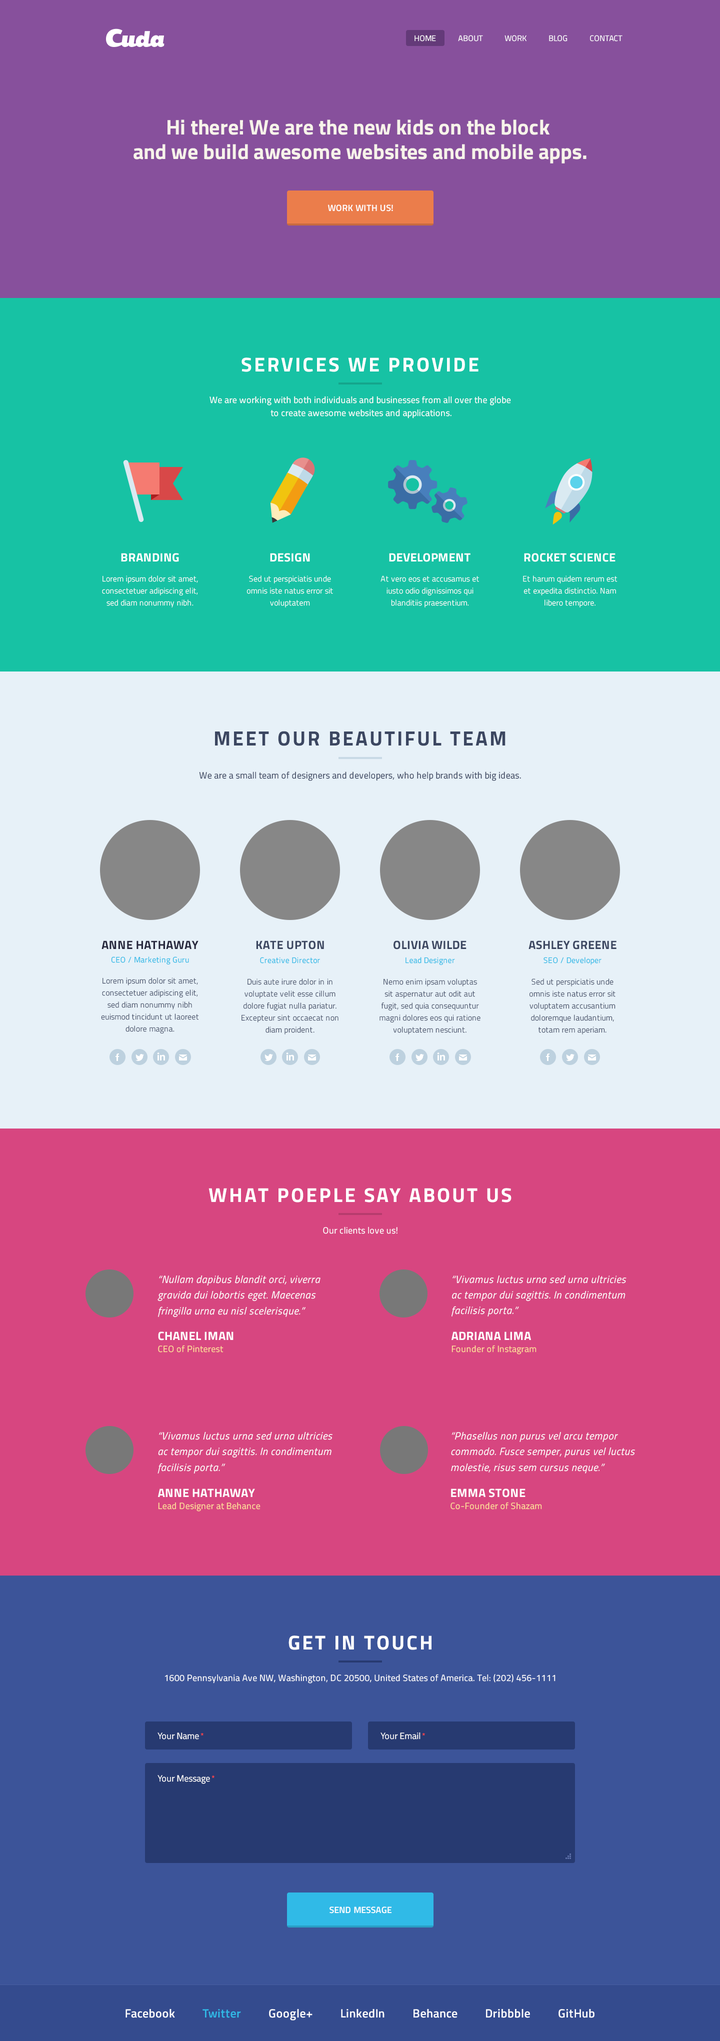
<style>
.page{position:relative;width:720px;height:2041px}
.page>*{position:absolute;margin:0}
.t1{font:8px "TitilliumWeb-Regular";color:#ffffff;text-transform:uppercase}
.t2{font:21.1px/24.4px "TitilliumWeb-Bold";color:#f7f3ea}
.t3{font:9px "TitilliumWeb-SemiBold";letter-spacing:0.02em;color:#ffffff}
.t4{font:20px "TitilliumWeb-Bold";letter-spacing:0.1em;color:#ffffff}
.t5{font:9px/13px "TitilliumWeb-Regular";letter-spacing:0.02em;color:#ffffff}
.t6{font:12px "TitilliumWeb-Bold";letter-spacing:0.02em;color:#ffffff;text-transform:uppercase}
.t7{font:8px/12px "TitilliumWeb-Light";letter-spacing:0.02em;color:#ffffff}
.t8{font:20.6px "TitilliumWeb-Bold";letter-spacing:0.1em;color:#3c4761;scale:0.97 1}
.t9{font:9.3px "TitilliumWeb-Regular";letter-spacing:0.02em;color:#3c4761;scale:0.97 1}
.t10{font:12px "TitilliumWeb-Bold";letter-spacing:0.02em;color:#27283d;text-transform:uppercase}
.t11{font:12px "TitilliumWeb-Bold";letter-spacing:0.02em;color:#3c4761;text-transform:uppercase}
.t12{font:8px "TitilliumWeb-Regular";letter-spacing:0.02em;color:#30bae7}
.t13{font:8px/12px "TitilliumWeb-Light";letter-spacing:0.02em;color:#3c4761}
.t14{font:9px "TitilliumWeb-Regular";letter-spacing:0.02em;color:#ffffff}
.t15{font:10.5px/15.6px "TitilliumWeb-Italic";letter-spacing:0.02em;color:#ffffff}
.t16{font:12px "TitilliumWeb-Bold";letter-spacing:0.02em;color:#ffffff}
.t17{font:9px "TitilliumWeb-Regular";letter-spacing:0.02em;color:#ffdd99}
.t18{font:9px "TitilliumWeb-Regular";color:#ffffff}
.t19{font:8px "ArialMT";color:#ff4444}
.t20{font:12px "TitilliumWeb-SemiBold";letter-spacing:0.02em;color:#ffffff}
.t21{font:12px "TitilliumWeb-SemiBold";letter-spacing:0.02em;color:#30bae7}
</style>
<div class="page">
<p class="t1" style="left:414px;top:35px;width:208px;height:7px">Home           About           WORK           Blog           Contact</p>
<p class="t2" style="left:134px;top:120px;width:452px;height:44px;text-align:center">Hi there! We are the new kids on the block <br>and we build awesome websites and mobile apps.</p>
<p class="t3" style="left:328px;top:204px;width:65px;height:8px">WORK WITH US!</p>
<p class="t4" style="left:242px;top:358px;width:236px;height:14px">SERVICES WE PROVIDE</p>
<p class="t5" style="left:210px;top:396px;width:301px;height:22px;text-align:center">We are working with both individuals and businesses from all over the globe <br>to create awesome websites and applications.</p>
<p class="t6" style="left:121px;top:553px;width:58px;height:9px">Branding</p>
<p class="t6" style="left:270px;top:553px;width:40px;height:9px">Design</p>
<p class="t6" style="left:389px;top:553px;width:81px;height:9px">Development</p>
<p class="t6" style="left:524px;top:553px;width:92px;height:9px">ROCKET SCIENCE</p>
<p class="t7" style="left:102px;top:576px;width:96px;height:32px;text-align:center">Lorem ipsum dolor sit amet, <br>consectetuer adipiscing elit, sed diam nonummy nibh.</p>
<p class="t7" style="left:246px;top:576px;width:87px;height:32px;text-align:center">Sed ut perspiciatis unde omnis iste natus error sit voluptatem</p>
<p class="t7" style="left:380px;top:576px;width:99px;height:32px;text-align:center">At vero eos et accusamus et iusto odio dignissimos qui blanditiis praesentium.</p>
<p class="t7" style="left:523px;top:576px;width:95px;height:32px;text-align:center">Et harum quidem rerum est et expedita distinctio. Nam libero tempore.</p>
<p class="t8" style="left:215px;top:731px;width:291px;height:15px">MEET OUR BEAUTIFUL TEAM</p>
<p class="t9" style="left:199px;top:772px;width:322px;height:9px">We are a small team of designers and developers, who help brands with big ideas.</p>
<p class="t10" style="left:102px;top:940px;width:96px;height:9px">ANNE HATHAWAY</p>
<p class="t11" style="left:256px;top:940px;width:68px;height:10px">Kate Upton</p>
<p class="t11" style="left:394px;top:940px;width:72px;height:10px">Olivia Wilde</p>
<p class="t11" style="left:528px;top:940px;width:88px;height:10px">Ashley Greene</p>
<p class="t12" style="left:111px;top:956px;width:78px;height:8px">CEO / Marketing Guru</p>
<p class="t12" style="left:260px;top:957px;width:60px;height:7px">Creative Director</p>
<p class="t12" style="left:406px;top:957px;width:49px;height:8px">Lead Designer</p>
<p class="t12" style="left:544px;top:957px;width:58px;height:8px">SEO / Developer</p>
<p class="t13" style="left:101px;top:978px;width:98px;height:56px;text-align:center">Lorem ipsum dolor sit amet, <br>consectetuer adipiscing elit, sed diam nonummy nibh euismod tincidunt ut laoreet dolore magna.</p>
<p class="t13" style="left:242px;top:978px;width:96px;height:56px;text-align:center">Duis aute irure dolor in in voluptate velit esse cillum dolore fugiat nulla pariatur. Excepteur sint occaecat non diam proident.</p>
<p class="t13" style="left:380px;top:978px;width:100px;height:56px;text-align:center">Nemo enim ipsam voluptas sit aspernatur aut odit aut fugit, sed quia consequuntur magni dolores eos qui ratione voluptatem nesciunt.</p>
<p class="t13" style="left:529px;top:978px;width:87px;height:56px;text-align:center">Sed ut perspiciatis unde omnis iste natus error sit voluptatem accusantium doloremque laudantium, totam rem aperiam.</p>
<p class="t4" style="left:208px;top:1188px;width:304px;height:14px">WHAT POEPLE SAY ABOUT US</p>
<p class="t14" style="left:323px;top:1226px;width:75px;height:8px">Our clients love us!</p>
<p class="t15" style="left:158px;top:1275px;width:162px;height:43px">“Nullam dapibus blandit orci, viverra gravida dui lobortis eget. Maecenas fringilla urna eu nisl scelerisque.”</p>
<p class="t15" style="left:452px;top:1275px;width:174px;height:41px">“Vivamus luctus urna sed urna ultricies ac tempor dui sagittis. In condimentum facilisis porta.”</p>
<p class="t6" style="left:158px;top:1332px;width:76px;height:8px">Chanel Iman</p>
<p class="t16" style="left:452px;top:1332px;width:79px;height:8px">ADRIANA LIMA</p>
<p class="t17" style="left:158px;top:1345px;width:66px;height:7px">CEO of Pinterest</p>
<p class="t17" style="left:452px;top:1345px;width:84px;height:9px">Founder of Instagram</p>
<p class="t15" style="left:158px;top:1432px;width:174px;height:42px">“Vivamus luctus urna sed urna ultricies ac tempor dui sagittis. In condimentum facilisis porta.”</p>
<p class="t15" style="left:451px;top:1432px;width:184px;height:42px">“Phasellus non purus vel arcu tempor commodo. Fusce semper, purus vel luctus molestie, risus sem cursus neque.”</p>
<p class="t6" style="left:158px;top:1488px;width:97px;height:9px">ANNE HATHAWAY</p>
<p class="t6" style="left:451px;top:1488px;width:75px;height:10px">EMMA STONE</p>
<p class="t17" style="left:158px;top:1502px;width:102px;height:10px">Lead Designer at Behance</p>
<p class="t17" style="left:450px;top:1502px;width:92px;height:8px">Co-Founder of Shazam</p>
<p class="t4" style="left:288px;top:1636px;width:144px;height:14px">GET IN TOUCH</p>
<p class="t14" style="left:164px;top:1674px;width:392px;height:10px">1600 Pennsylvania Ave NW, Washington, DC 20500, United States of America. Tel: (202) 456-1111</p>
<p class="t18" style="left:158px;top:1732px;width:46px;height:8px">Your Name <span class="t19">*</span></p>
<p class="t18" style="left:380px;top:1732px;width:45px;height:8px">Your Email <span class="t19">*</span></p>
<p class="t18" style="left:158px;top:1775px;width:56px;height:9px">Your Message <span class="t19">*</span></p>
<p class="t3" style="left:330px;top:1906px;width:62px;height:8px">SEND MESSAGE</p>
<p class="t20" style="left:126px;top:2009px;width:468px;height:11px">Facebook          <span class="t21">Twitter</span>          Google+          LinkedIn          Behance          Dribbble          GitHub</p>
</div>
